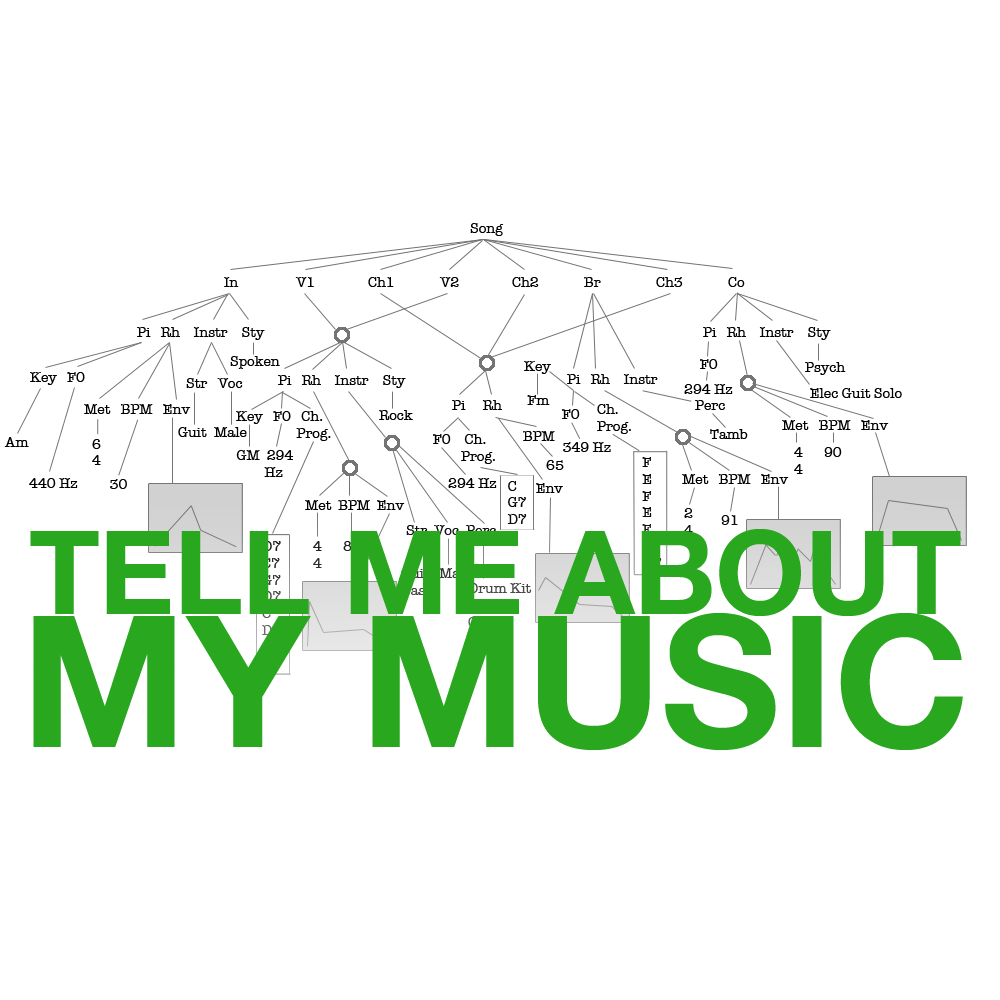
<style>
.page{position:relative;width:1000px;height:1000px;background:#ffffff}
.page>*{position:absolute;margin:0}
.t1{font:14px "AmericanTypewriter";color:#000000}
.t2{font:14px "AmericanTypewriter"}
.t3{font:115.5px "HelveticaNeue-Bold";color:#28a71f}
.t4{font:14px "AmericanTypewriter";color:#21271f}
.t5{font:183px "HelveticaNeue-Bold";color:#28a71f}
</style>
<div class="page">
<p class="t1" style="left:470px;top:223px;width:34px;height:13px">Song</p>
<p class="t1" style="left:224px;top:277px;width:521px;height:10px">In  V1  Ch1  V2  Ch2  Br  Ch3  Co</p>
<p class="t1" style="left:137px;top:327px;width:128px;height:13px">Pi   Rh    Instr    Sty</p>
<p class="t1" style="left:703px;top:327px;width:128px;height:13px">Pi   Rh    Instr    Sty</p>
<p class="t1" style="left:230px;top:356px;width:50px;height:13px">Spoken</p>
<p class="t1" style="left:524px;top:361px;width:27px;height:44px">Key<br><br> Fm</p>
<p class="t1" style="left:700px;top:359px;width:18px;height:10px">F0</p>
<p class="t1" style="left:805px;top:362px;width:41px;height:13px">Psych</p>
<p class="t1" style="left:30px;top:372px;width:55px;height:13px">Key   F0</p>
<p class="t1" style="left:278px;top:375px;width:128px;height:13px">Pi   Rh    Instr    Sty</p>
<p class="t1" style="left:567px;top:374px;width:91px;height:10px">Pi   Rh    Instr</p>
<p class="t1" style="left:186px;top:378px;width:57px;height:10px">Str   Voc</p>
<p class="t1" style="left:684px;top:384px;width:49px;height:10px">294 Hz</p>
<p class="t1" style="left:810px;top:388px;width:92px;height:10px">Elec Guit Solo</p>
<p class="t1" style="left:452px;top:400px;width:50px;height:10px">Pi     Rh</p>
<p class="t1" style="left:695px;top:400px;width:30px;height:10px">Perc</p>
<p class="t1" style="left:84px;top:404px;width:107px;height:10px">Met   BPM   Env</p>
<p class="t1" style="left:236px;top:411px;width:95px;height:30px">Key   F0   Ch.<br>        Prog.</p>
<p class="t1" style="left:379px;top:410px;width:34px;height:10px">Rock</p>
<p class="t1" style="left:562px;top:409px;width:18px;height:10px">F0</p>
<p class="t1" style="left:597px;top:404px;width:34px;height:30px">Ch.<br>Prog.</p>
<p class="t1" style="left:782px;top:420px;width:107px;height:10px">Met   BPM   Env</p>
<p class="t1" style="left:4px;top:437px;width:25px;height:10px">Am</p>
<p class="t1" style="left:178px;top:427px;width:69px;height:10px">Guit Male</p>
<p class="t1" style="left:433px;top:434px;width:62px;height:30px">F0    Ch.<br>        Prog.</p>
<p class="t1" style="left:523px;top:431px;width:32px;height:10px">BPM</p>
<p class="t1" style="left:710px;top:429px;width:38px;height:10px">Tamb</p>
<p class="t1" style="left:92px;top:439px;width:9px;height:26px">6<br>4</p>
<p class="t1" style="left:563px;top:442px;width:48px;height:10px">349 Hz</p>
<p class="t1" style="left:794px;top:447px;width:48px;height:27px">4      90<br>4</p>
<p class="t1" style="left:236px;top:450px;width:58px;height:27px">GM  294<br>         Hz</p>
<p class="t1" style="left:546px;top:460px;width:18px;height:10px">65</p>
<p class="t2" style="left:642px;top:457px;width:20px;height:111px">F<br>E<br>F<br>E<br>F<br>E<br>D7</p>
<p class="t1" style="left:29px;top:478px;width:49px;height:10px">440 Hz</p>
<p class="t1" style="left:110px;top:479px;width:17px;height:10px">30</p>
<p class="t1" style="left:448px;top:478px;width:49px;height:10px">294 Hz</p>
<p class="t1" style="left:507px;top:481px;width:20px;height:43px">C<br>G7<br>D7</p>
<p class="t1" style="left:536px;top:483px;width:27px;height:10px">Env</p>
<p class="t1" style="left:682px;top:474px;width:107px;height:10px">Met   BPM   Env</p>
<p class="t1" style="left:305px;top:500px;width:100px;height:10px">Met  BPM  Env</p>
<p class="t2" style="left:684px;top:508px;width:9px;height:27px">2<br>4</p>
<p class="t1" style="left:721px;top:515px;width:17px;height:10px">91</p>
<p class="t3" style="left:30px;top:529px;width:931px;height:87px">TELL ME ABOUT</p>
<p class="t2" style="left:406px;top:525px;width:90px;height:10px">Str  Voc  Perc</p>
<p class="t2" style="left:262px;top:541px;width:19px;height:128px">D7<br>C7<br>G7<br>D7<br>C<br>D<br>C<br>D</p>
<p class="t4" style="left:313px;top:541px;width:47px;height:27px">4      89<br>4</p>
<p class="t2" style="left:401px;top:568px;width:31px;height:27px">Guit<br>Bass</p>
<p class="t2" style="left:439px;top:568px;width:33px;height:10px">Male</p>
<p class="t2" style="left:468px;top:583px;width:63px;height:47px">Drum Kit<br>Tamb<br>Organ</p>
<p class="t5" style="left:33px;top:613px;width:930px;height:137px">MY MUSIC</p>
</div>
